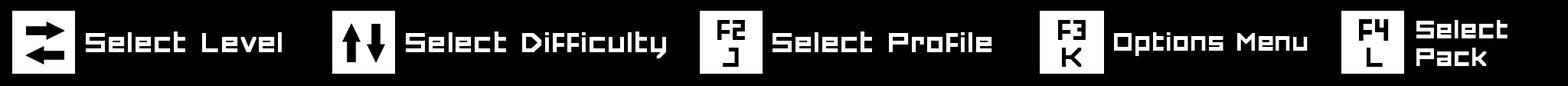
<style>
.page{position:relative;width:1568px;height:86px;background:#000000}
.page>*{position:absolute;margin:0}
.t1{font:38.7px "FORCED-SQUARE";color:#000000}
.t2{font:38.9px "FORCED-SQUARE";color:#000000}
.t3{font:41.4px "FORCED-SQUARE";color:#000000}
.t4{font:33.3px/27.6px "FORCED-SQUARE";color:#ffffff}
.t5{font:36.8px "FORCED-SQUARE";color:#ffffff}
.t6{font:33.3px "FORCED-SQUARE";color:#ffffff}
.t7{font:36.6px "FORCED-SQUARE";color:#000000}
</style>
<div class="page">
<p class="t1" style="left:717px;top:20px;width:28px;height:20px">f2</p>
<p class="t2" style="left:1058px;top:20px;width:28px;height:20px">f3</p>
<p class="t3" style="left:1359px;top:19px;width:30px;height:22px">f4</p>
<p class="t4" style="left:1416px;top:20px;width:92px;height:46px">Select<br>Pack</p>
<p class="t5" style="left:86px;top:31px;width:196px;height:21px">Select Level</p>
<p class="t5" style="left:406px;top:31px;width:260px;height:27px">Select Difficulty</p>
<p class="t5" style="left:773px;top:31px;width:219px;height:21px">Select Profile</p>
<p class="t6" style="left:1114px;top:32px;width:194px;height:24px">Options Menu</p>
<p class="t7" style="left:723px;top:47px;width:16px;height:20px">J</p>
<p class="t7" style="left:1062px;top:47px;width:20px;height:20px">K</p>
<p class="t7" style="left:1367px;top:47px;width:16px;height:20px">L</p>
</div>
